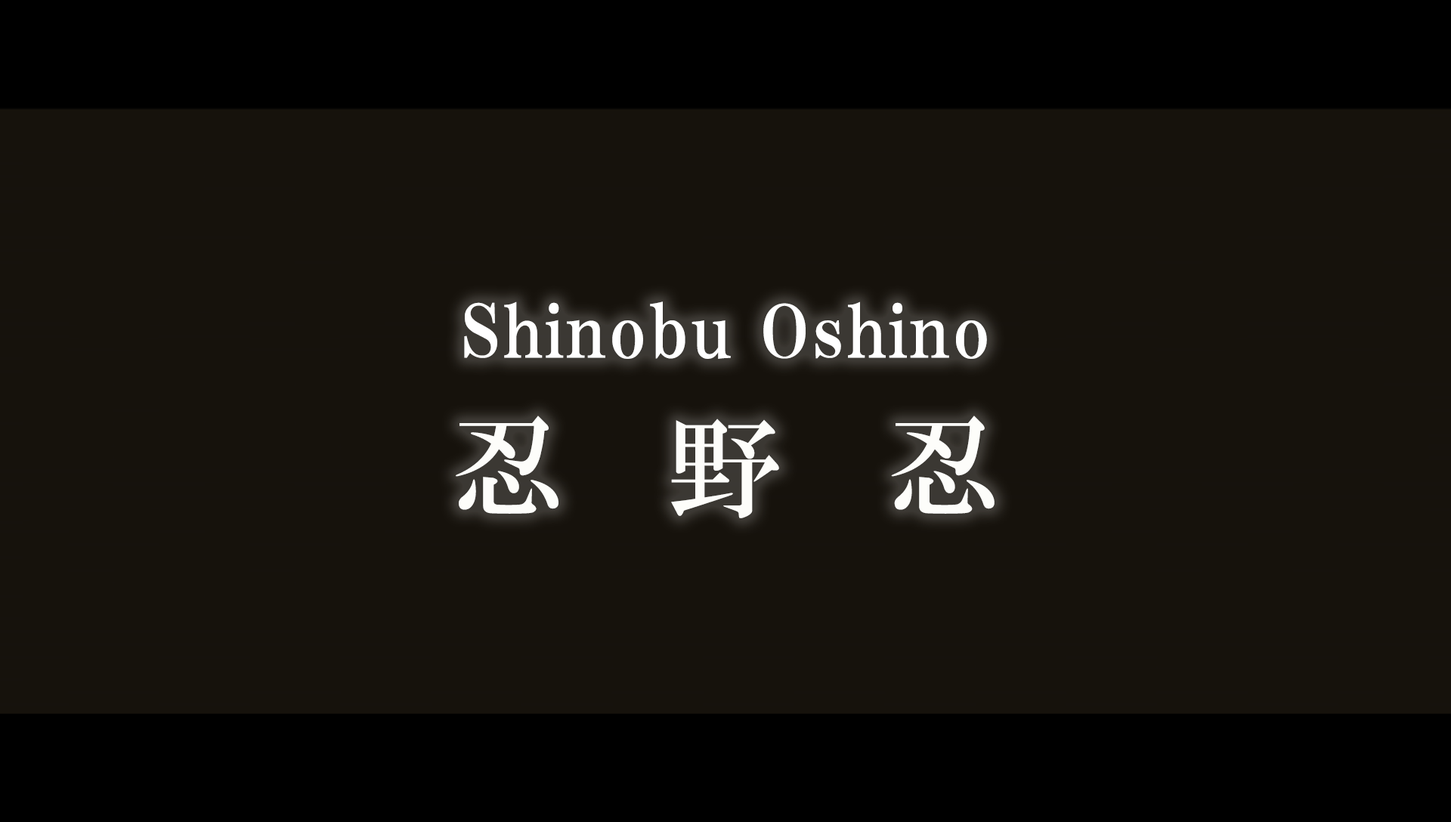
<style>
.page{position:relative;width:1451px;height:822px;background:#16120c}
.page>*{position:absolute;margin:0}
.t1{font:72.5px "HGPMinchoE";letter-spacing:0.025em;color:#ffffff}
.t2{font:114.1px "HGMinchoB";letter-spacing:0.91em;color:#fdfdfa}
</style>
<div class="page">
<p class="t1" style="left:464px;top:301px;width:523px;height:58px">Shinobu Oshino</p>
<p class="t2" style="left:456px;top:416px;width:538px;height:102px">忍野忍</p>
</div>
